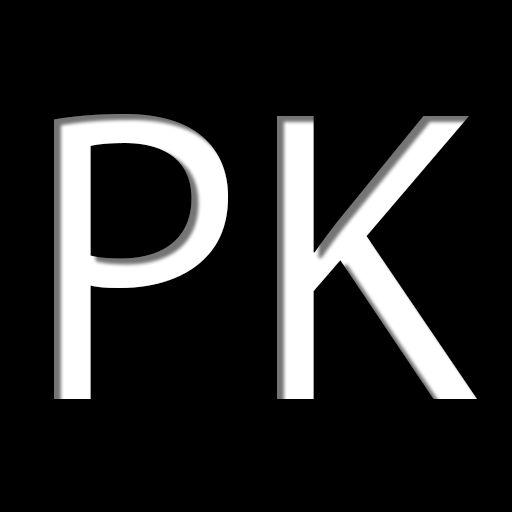
<style>
.page{position:relative;width:512px;height:512px;background:#000000}
.page>*{position:absolute;margin:0}
.t1{font:420px "MyriadPro-Regular";color:#ffffff}
</style>
<div class="page">
<p class="t1" style="left:54px;top:114px;width:423px;height:285px">PK</p>
</div>
